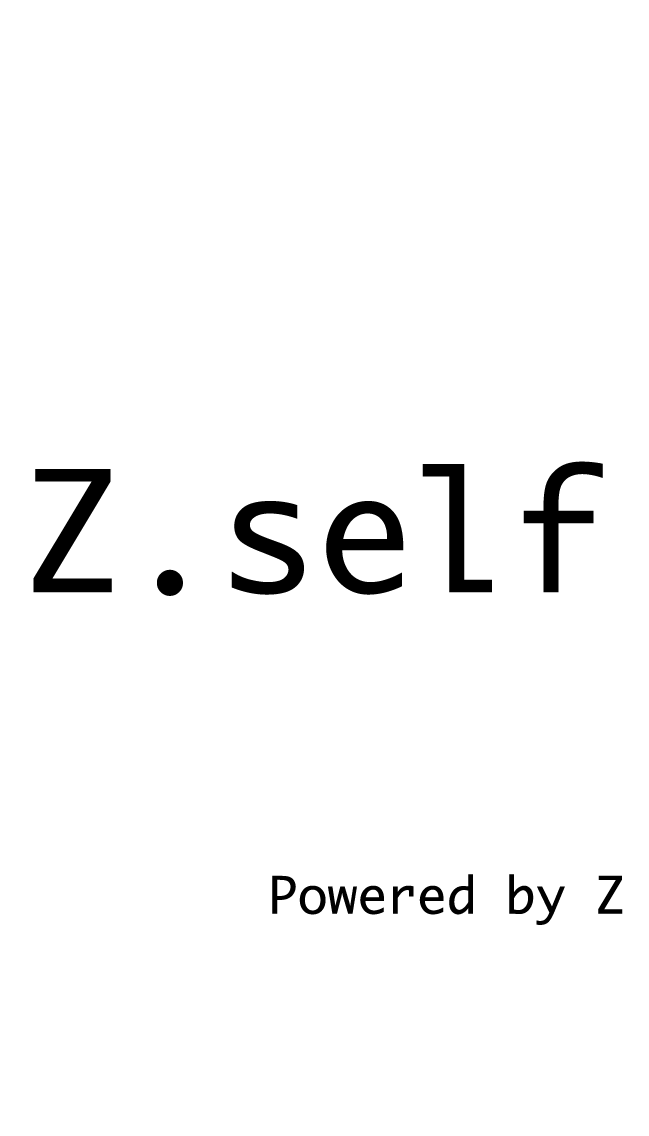
<style>
.page{position:relative;width:649px;height:1136px;background:#ffffff}
.page>*{position:absolute;margin:0}
.t1{font:162.3px "Monaco";color:#000000}
.t2{font:49.6px "Monaco";color:#000000}
</style>
<div class="page">
<p class="t1" style="left:33px;top:461px;width:570px;height:135px">Z.self</p>
<p class="t2" style="left:272px;top:874px;width:351px;height:51px">Powered by Z</p>
</div>
